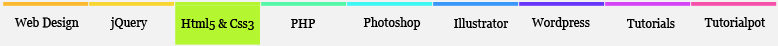
<style>
.page{position:relative;width:778px;height:46px;background:#f2f2f2}
.page>*{position:absolute;margin:0}
.t1{font:12px "Georgia";color:#000000}
</style>
<div class="page">
<p class="t1" style="left:14px;top:17px;width:65px;height:13px">Web Design</p>
<p class="t1" style="left:110px;top:17px;width:38px;height:13px">jQuery</p>
<p class="t1" style="left:363px;top:17px;width:58px;height:13px">Photoshop</p>
<p class="t1" style="left:531px;top:17px;width:59px;height:13px">Wordpress</p>
<p class="t1" style="left:704px;top:17px;width:62px;height:13px">Tutorialpot</p>
<p class="t1" style="left:181px;top:18px;width:73px;height:12px">Html5 &amp; Css3</p>
<p class="t1" style="left:291px;top:19px;width:24px;height:9px">PHP</p>
<p class="t1" style="left:454px;top:18px;width:55px;height:10px">Illustrator</p>
<p class="t1" style="left:627px;top:18px;width:48px;height:10px">Tutorials</p>
</div>
